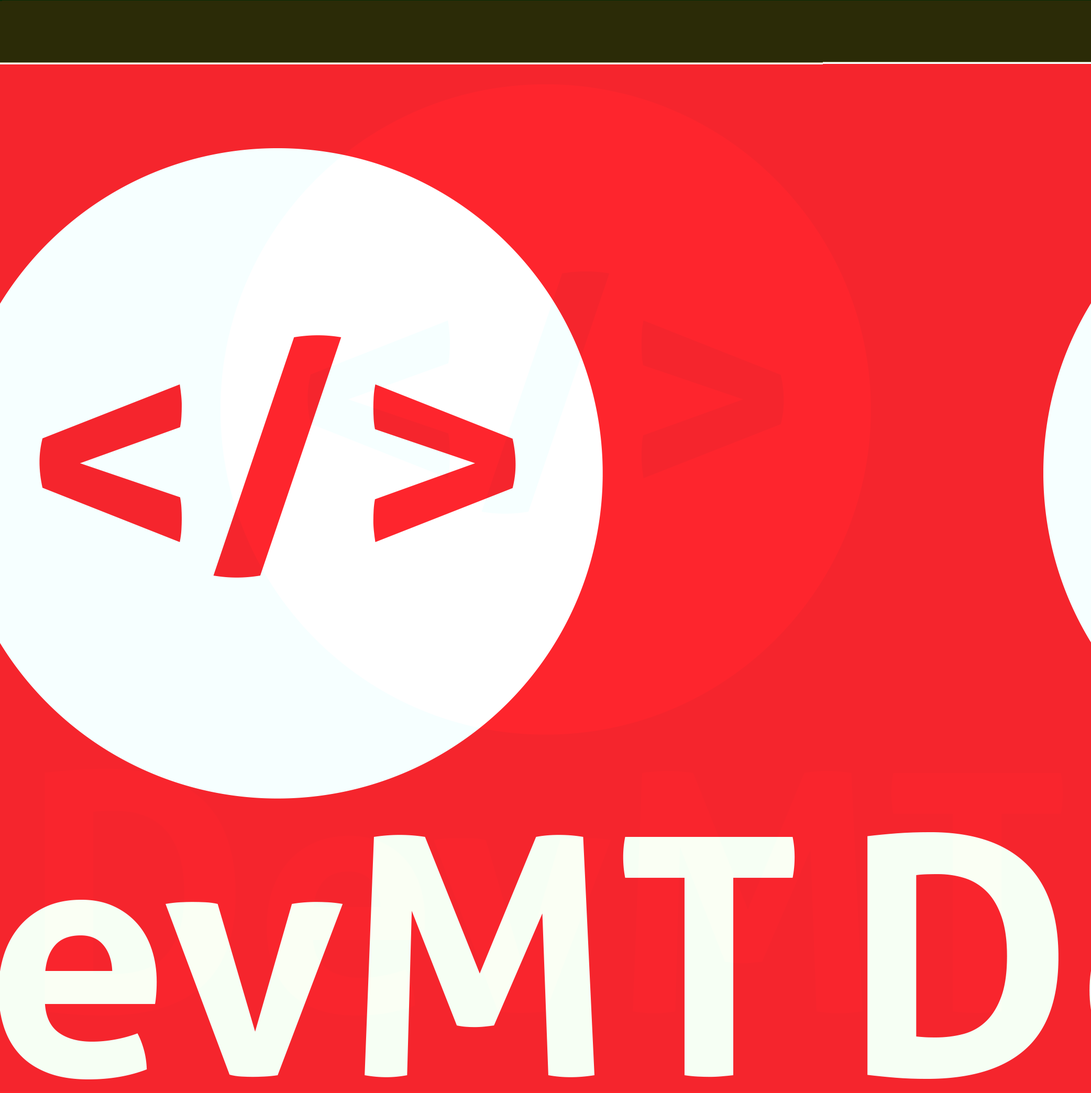
<style>
.page{position:relative;width:1091px;height:1093px;background:#f5252d}
.page>*{position:absolute;margin:0}
.t1{font:331.3px "Aller-Bold"}
</style>
<div class="page">
<p class="t1" style="left:307px;top:271px;width:477px;height:242px">&lt;/&gt;</p>
<p class="t1" style="left:45px;top:768px;width:1018px;height:247px">DevMT</p>
</div>
